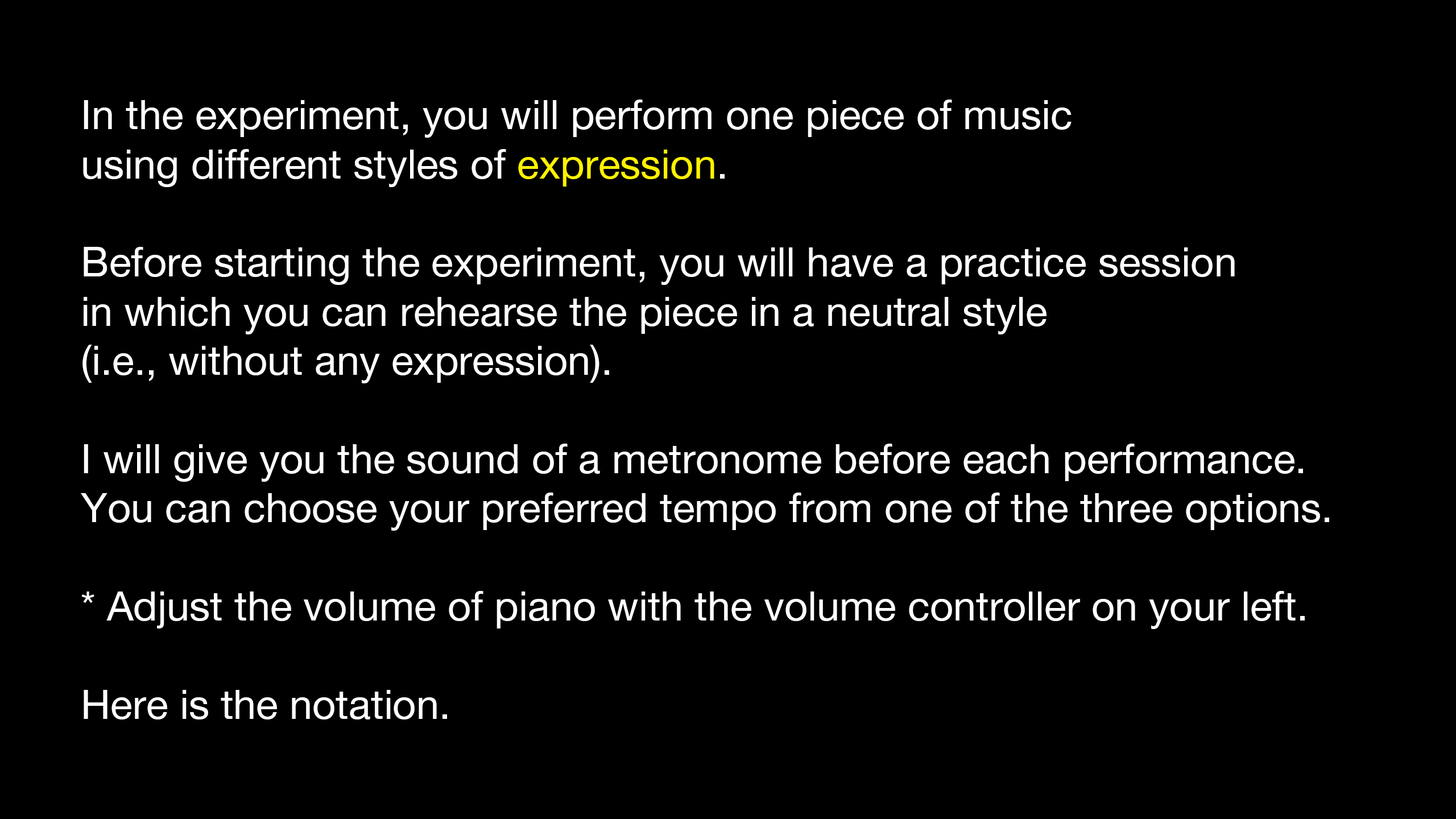
<style>
.page{position:relative;width:1456px;height:819px;background:#000000}
.page>*{position:absolute;margin:0}
.t1{font:40.9px "HelveticaNeue";color:#ffffff}
.t2{font:40.9px "HelveticaNeue";color:#fff200}
</style>
<div class="page">
<p class="t1" style="left:81px;top:100px;width:1248px;height:619px">In the experiment, you will perform one piece of music<br>using different styles of <span class="t2">expression</span>.<br><br>Before starting the experiment, you will have a practice session<br>in which you can rehearse the piece in a neutral style<br>(i.e., without any expression).<br><br>I will give you the sound of a metronome before each performance. <br>You can choose your preferred tempo from one of the three options.<br><br>* Adjust the volume of piano with the volume controller on your left.<br><br>Here is the notation.</p>
</div>
